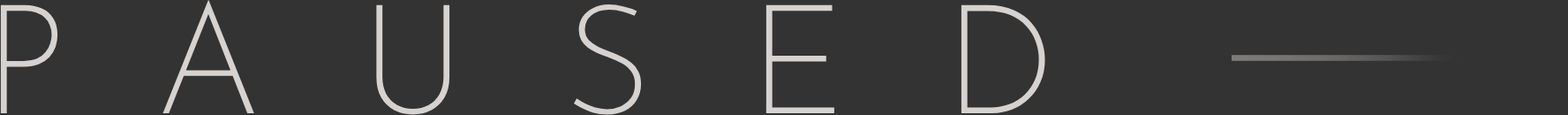
<style>
.page{position:relative;width:1568px;height:115px;background:#333333}
.page>*{position:absolute;margin:0}
.t1{font:152.6px "JosefinSansRoman-Regular_233.000wght";letter-spacing:0.64em;color:#d6d2d0}
</style>
<div class="page">
<p class="t1" style="left:0px;top:0px;width:1045px;height:115px">PAUSED</p>
</div>
